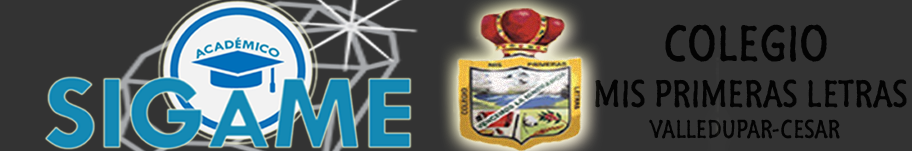
<style>
.page{position:relative;width:912px;height:151px;background:#333333}
.page>*{position:absolute;margin:0}
.t1{font:38.5px "SegoeMarker";color:#030303}
.t2{font:51px "SegoeMarker";color:#030303}
.t3{font:26px "SegoeMarker";color:#030303}
</style>
<div class="page">
<p class="t1" style="left:595px;top:24px;width:312px;height:115px;text-align:center"><span class="t2">COLEGIO<br></span> MIS PRIMERAS LETRAS<br><span class="t3">VALLEDUPAR-CESAR</span></p>
</div>
